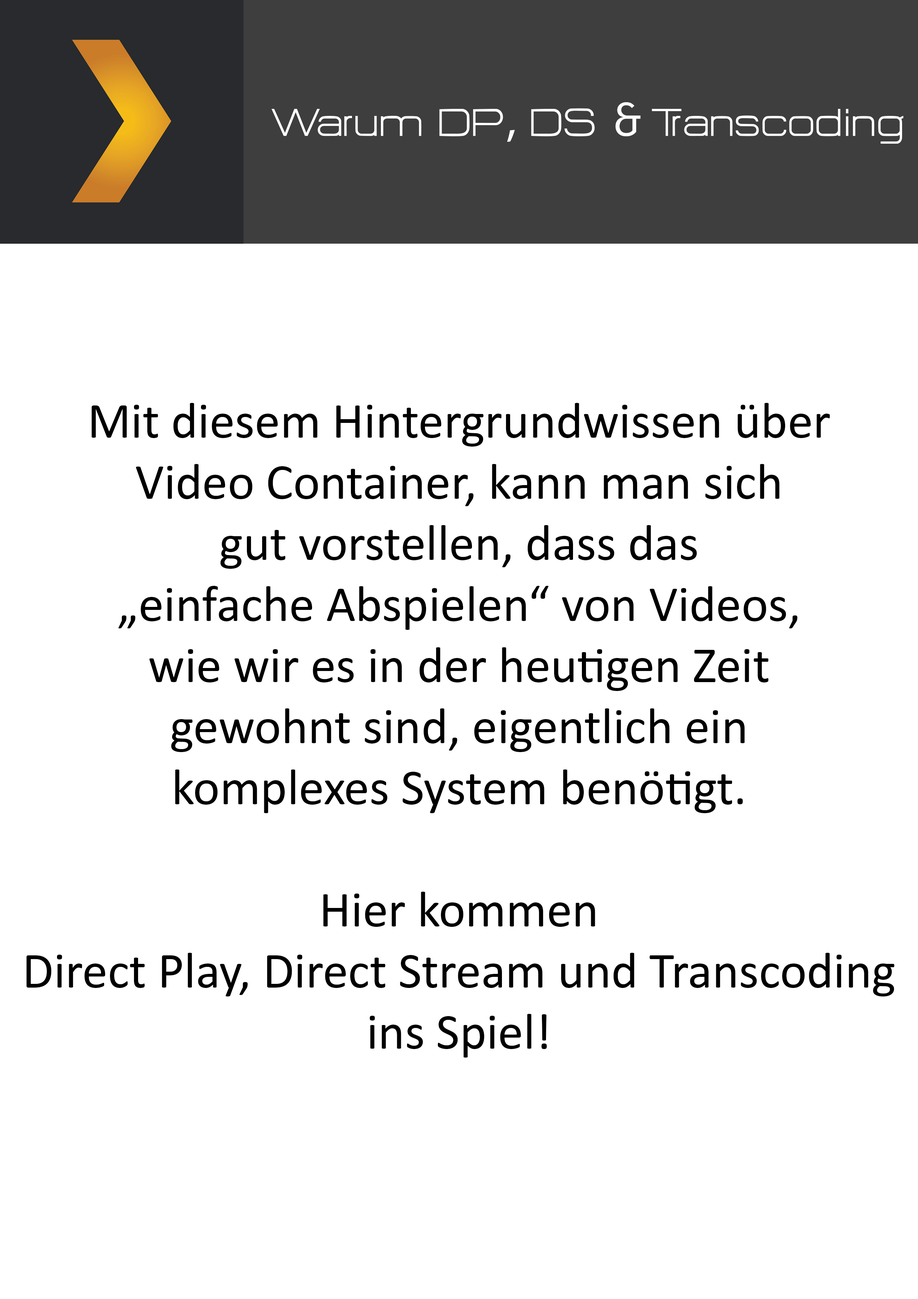
<style>
.page{position:relative;width:918px;height:1299px;background:#ffffff}
.page>*{position:absolute;margin:0}
.t1{font:47.8px "HURTMOLDPersonalUse-Regular";color:#ffffff}
.t2{font:47.8px "MyriadPro-Regular";color:#ffffff}
.t3{font:47.8px "FiraCode-Regular";color:#ffffff}
.t4{font:50.9px "Calibri";color:#000000}
</style>
<div class="page">
<p class="t1" style="left:271px;top:102px;width:633px;height:42px">Warum DP<span class="t2">,</span> DS <span class="t3">&amp; </span>Transcoding</p>
<p class="t4" style="left:26px;top:403px;width:868px;height:654px;text-align:center">Mit diesem Hintergrundwissen über<br>Video Container, kann man sich<br>gut vorstellen, dass das<br>„einfache Abspielen“ von Videos,<br>wie wir es in der heutigen Zeit<br>gewohnt sind, eigentlich ein<br>komplexes System benötigt.<br><br>Hier kommen<br>Direct Play, Direct Stream und Transcoding<br>ins Spiel!</p>
</div>
